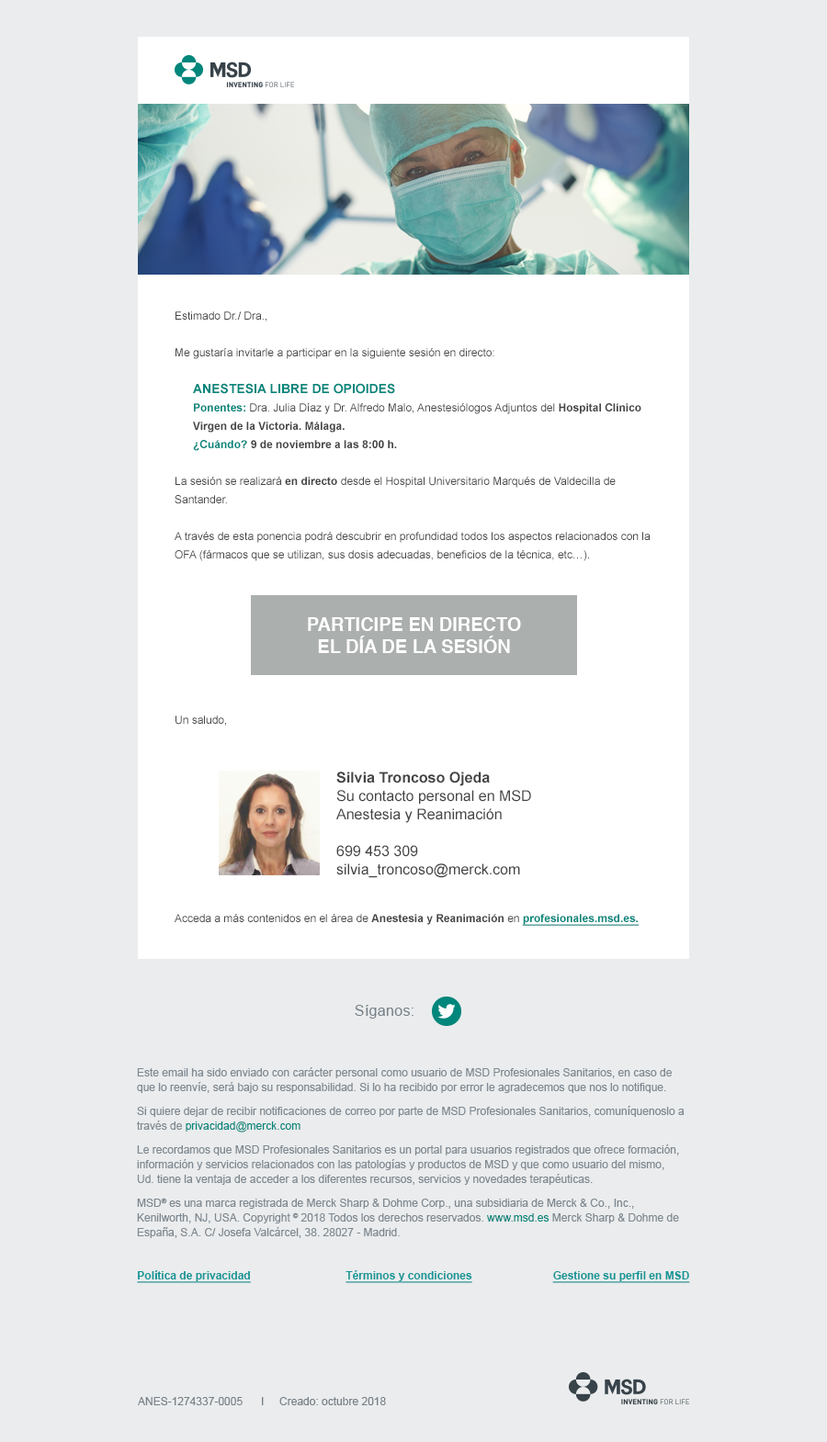
<style>
.page{position:relative;width:827px;height:1442px;background:#eaeced}
.page>*{position:absolute;margin:0}
.t1{font:11px/18.4px "ArialMT";color:#444444}
.t2{font:12.9px/18.4px "Arial-BoldMT";color:#00867b;text-transform:uppercase}
.t3{font:11px/18.4px "Arial-BoldMT";color:#00867b}
.t4{font:11px/18.4px "Arial-BoldMT";color:#444444}
.t5{font:18.4px/22px "Helvetica-Bold";color:#ffffff}
.t6{font:14.7px/18.4px "ArialMT";color:#444444}
.t7{font:14.7px/18.4px "Arial-BoldMT";color:#444444}
.t8{font:11px "ArialMT";color:#444444}
.t9{font:11px "Arial-BoldMT";color:#444444}
.t10{font:11px "Arial-BoldMT";color:#00867b;text-decoration:underline}
.t11{font:14.7px "ArialMT";letter-spacing:0.02em;color:#788189}
.t12{font:11px/14.7px "ArialMT";color:#7e8890}
.t13{font:11px/14.7px "ArialMT";color:#00867b}
.t14{font:11px "Arial-BoldMT";color:#139696;text-decoration:underline}
.t15{font:11px "ArialMT";color:#778088}
</style>
<div class="page">
<p class="t1" style="left:175px;top:311px;width:475px;height:415px">Estimado Dr./ Dra.,<br><br>Me gustaría invitarle a participar en la siguiente sesión en directo:<br><br><span class="t2">Anestesia Libre de Opioides<br></span><span class="t3">Ponentes: </span>Dra. Julia Díaz y Dr. Alfredo Malo, Anestesiólogos Adjuntos del <span class="t4">Hospital Clínico Virgen de la Victoria. Málaga.<br></span><span class="t3">¿Cuándo? </span><span class="t4">9 de noviembre a las 8:00 h.<br></span><br>La sesión se realizará <span class="t4">en directo </span>desde el Hospital Universitario Marqués de Valdecilla de Santander.<br><br>A través de esta ponencia podrá descubrir en profundidad todos los aspectos relacionados con la OFA (fármacos que se utilizan, sus dosis adecuadas, beneficios de la técnica, etc…).<br><br><br><br><br><br><br><br><br>Un saludo,<br><br><br><br><br><br><br><br><br><br><br><br><br><br><br><br><br>Cordialmente,<br>XXXXXXXXXXXXXX</p>
<p class="t5" style="left:308px;top:617px;width:213px;height:36px;text-align:center">PARTICIPE EN DIRECTO<br>EL DÍA DE LA SESIÓN</p>
<p class="t6" style="left:336px;top:772px;width:195px;height:106px"><span class="t7">Silvia Troncoso Ojeda<br></span>Su contacto personal en MSD<br>Anestesia y Reanimación<br><br>699 453 309<br>silvia_troncoso@merck.com<br><br><br><br><br><br><br><br><br><br><br><br><br><br><br><br><br>Cordialmente,<br>XXXXXXXXXXXXXX</p>
<p class="t8" style="left:175px;top:914px;width:463px;height:12px">Acceda a más contenidos en el área de <span class="t9">Anestesia y Reanimación</span> en <span class="t10">profesionales.msd.es.</span></p>
<p class="t11" style="left:355px;top:1005px;width:58px;height:14px">Síganos:</p>
<p class="t12" style="left:137px;top:1067px;width:547px;height:171px">Este email ha sido enviado con carácter personal como usuario de MSD Profesionales Sanitarios, en caso de que lo reenvíe, será bajo su responsabilidad. Si lo ha recibido por error le agradecemos que nos lo notifique. <br>Si quiere dejar de recibir notificaciones de correo por parte de MSD Profesionales Sanitarios, comuníquenoslo a través de <span class="t13">privacidad@merck.com</span> <br>Le recordamos que MSD Profesionales Sanitarios es un portal para usuarios registrados que ofrece formación, información y servicios relacionados con las patologías y productos de MSD y que como usuario del mismo,<br>Ud. tiene la ventaja de acceder a los diferentes recursos, servicios y novedades terapéuticas. <br>MSD® es una marca registrada de Merck Sharp &amp; Dohme Corp., una subsidiaria de Merck &amp; Co., Inc., Kenilworth, NJ, USA. Copyright © 2018 Todos los derechos reservados. <span class="t13">www.msd.es</span> Merck Sharp &amp; Dohme de España, S.A. C/ Josefa Valcárcel, 38. 28027 - Madrid.</p>
<p class="t14" style="left:137px;top:1270px;width:114px;height:13px">Política de privacidad</p>
<p class="t14" style="left:345px;top:1270px;width:127px;height:13px">Términos y condiciones</p>
<p class="t14" style="left:552px;top:1271px;width:138px;height:12px">Gestione su perfil en MSD</p>
<p class="t15" style="left:138px;top:1397px;width:248px;height:9px">ANES-1274337-0005      I     Creado: octubre 2018</p>
</div>
